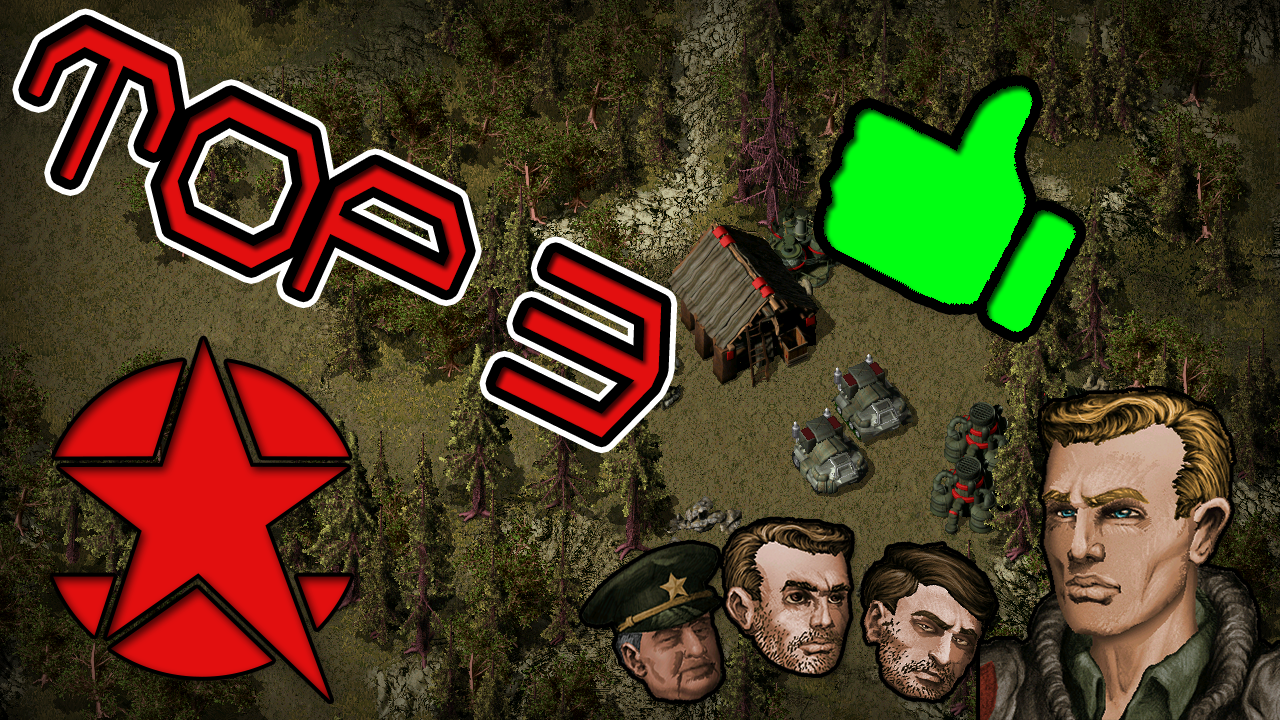
<style>
.page{position:relative;width:1280px;height:720px}
.page>*{position:absolute;margin:0}
.t1{font:176.9px "TRACKNormal";color:#e10f0f;font-weight:bold;scale:0.68 1}
</style>
<div class="page">
<p class="t1" style="left:28px;top:24px;width:634px;height:414px;rotate:26deg">TOP 3</p>
<p class="t1" style="left:28px;top:24px;width:634px;height:414px;rotate:26deg">TOP 3</p>
</div>
